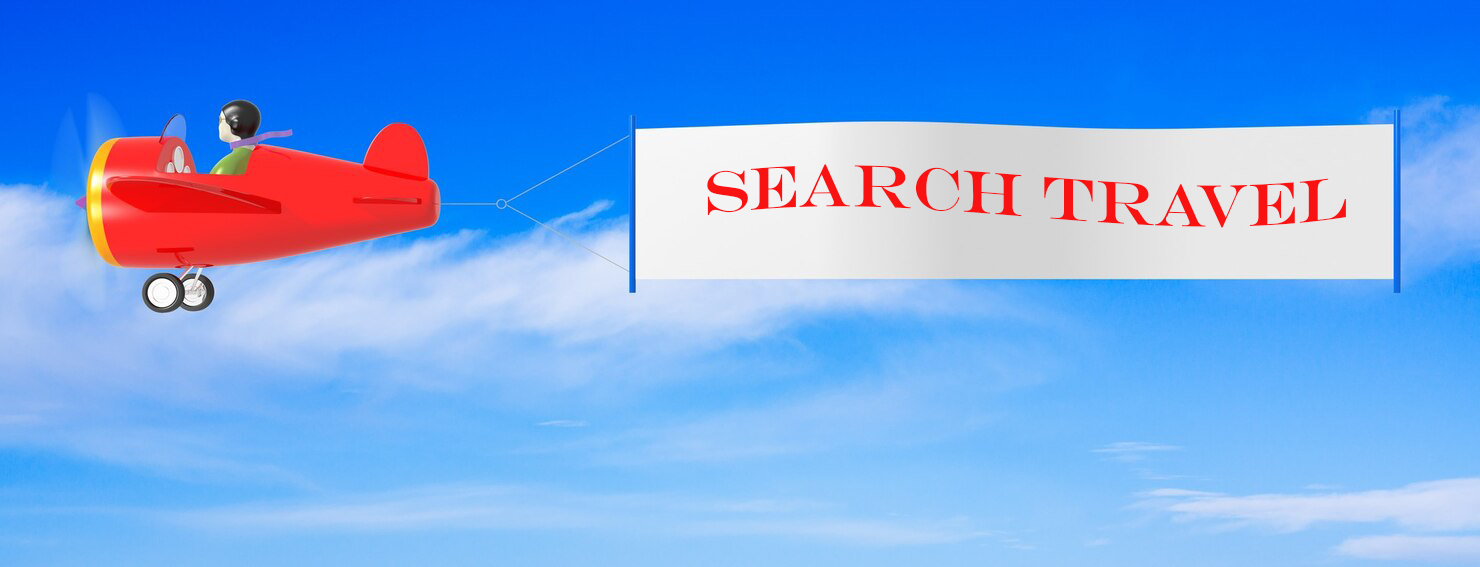
<style>
.page{position:relative;width:1480px;height:567px}
.page>*{position:absolute;margin:0}
.t1{font:60px "EngraversMT";color:#f81212}
</style>
<div class="page">
<p class="t1" style="left:707px;top:164px;width:639px;height:64px">Search Travel</p>
</div>
